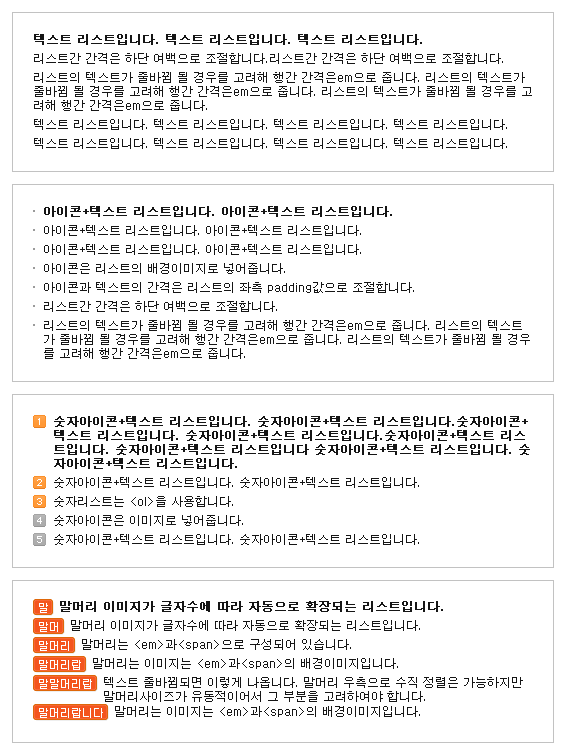
<style>
.page{position:relative;width:566px;height:755px;background:#ffffff}
.page>*{position:absolute;margin:0}
.t1{font:12px "Dotum";color:#151515;font-weight:bold}
.t2{font:12px "Dotum";color:#151515}
.t3{font:12px/14px "Dotum";color:#151515}
.t4{font:12px/14px "Dotum";color:#151515;font-weight:bold}
.t5{font:12px/19px "Dotum";color:#151515}
.t6{font:12px/19px "Dotum";color:#151515;font-weight:bold}
.t7{font:11px "Dotum";color:#ffffff}
</style>
<div class="page">
<p class="t1" style="left:34px;top:34px;width:388px;height:11px">텍스트 리스트입니다. 텍스트 리스트입니다. 텍스트 리스트입니다.</p>
<p class="t2" style="left:34px;top:53px;width:469px;height:11px">리스트간 간격은 하단 여백으로 조절합니다.리스트간 간격은 하단 여백으로 조절합니다.</p>
<p class="t3" style="left:34px;top:72px;width:498px;height:39px">리스트의 텍스트가 줄바뀜 될 경우를 고려해 행간 간격은em으로 줍니다. 리스트의 텍스트가<br>줄바뀜 될 경우를 고려해 행간 간격은em으로 줍니다. 리스트의 텍스트가 줄바뀜 될 경우를 고<br>려해 행간 간격은em으로 줍니다.</p>
<p class="t2" style="left:34px;top:119px;width:473px;height:11px">텍스트 리스트입니다. 텍스트 리스트입니다. 텍스트 리스트입니다. 텍스트 리스트입니다.</p>
<p class="t2" style="left:34px;top:138px;width:473px;height:11px">텍스트 리스트입니다. 텍스트 리스트입니다. 텍스트 리스트입니다. 텍스트 리스트입니다.</p>
<p class="t1" style="left:44px;top:206px;width:348px;height:11px">아이콘+텍스트 리스트입니다. 아이콘+텍스트 리스트입니다.</p>
<p class="t2" style="left:44px;top:225px;width:317px;height:11px">아이콘+텍스트 리스트입니다. 아이콘+텍스트 리스트입니다.</p>
<p class="t2" style="left:44px;top:244px;width:317px;height:11px">아이콘+텍스트 리스트입니다. 아이콘+텍스트 리스트입니다.</p>
<p class="t2" style="left:44px;top:263px;width:241px;height:11px">아이콘은 리스트의 배경이미지로 넣어줍니다.</p>
<p class="t2" style="left:44px;top:282px;width:370px;height:11px">아이콘과 텍스트의 간격은 리스트의 좌측 padding값으로 조절합니다.</p>
<p class="t2" style="left:44px;top:301px;width:233px;height:11px">리스트간 간격은 하단 여백으로 조절합니다.</p>
<p class="t3" style="left:44px;top:320px;width:486px;height:39px">리스트의 텍스트가 줄바뀜 될 경우를 고려해 행간 간격은em으로 줍니다. 리스트의 텍스트<br>가 줄바뀜 될 경우를 고려해 행간 간격은em으로 줍니다. 리스트의 텍스트가 줄바뀜 될 경우<br>를 고려해 행간 간격은em으로 줍니다.</p>
<p class="t4" style="left:54px;top:416px;width:476px;height:53px">숫자아이콘+텍스트 리스트입니다. 숫자아이콘+텍스트 리스트입니다.숫자아이콘+<br>텍스트 리스트입니다. 숫자아이콘+텍스트 리스트입니다.숫자아이콘+텍스트 리스<br>트입니다. 숫자아이콘+텍스트 리스트입니다 숫자아이콘+텍스트 리스트입니다. 숫<br>자아이콘+텍스트 리스트입니다.</p>
<p class="t5" style="left:54px;top:477px;width:365px;height:68px"><span class="t6"><br></span><br>숫자아이콘+텍스트 리스트입니다. 숫자아이콘+텍스트 리스트입니다.<br>숫자리스트는 &lt;ol&gt;을 사용합니다.<br>숫자아이콘은 이미지로 넣어줍니다.<br>숫자아이콘+텍스트 리스트입니다. 숫자아이콘+텍스트 리스트입니다.</p>
<p class="t7" style="left:39px;top:603px;width:9px;height:10px">말</p>
<p class="t1" style="left:60px;top:601px;width:383px;height:11px">말머리 이미지가 글자수에 따라 자동으로 확장되는 리스트입니다.</p>
<p class="t7" style="left:39px;top:622px;width:19px;height:10px">말머</p>
<p class="t2" style="left:71px;top:620px;width:349px;height:11px">말머리 이미지가 글자수에 따라 자동으로 확장되는 리스트입니다.</p>
<p class="t7" style="left:39px;top:641px;width:30px;height:10px">말머리</p>
<p class="t2" style="left:82px;top:639px;width:269px;height:11px">말머리는 &lt;em&gt;과&lt;span&gt;으로 구성되어 있습니다.</p>
<p class="t7" style="left:39px;top:660px;width:42px;height:10px">말머리랍</p>
<p class="t2" style="left:93px;top:658px;width:305px;height:11px">말머리는 이미지는 &lt;em&gt;과&lt;span&gt;의 배경이미지입니다.</p>
<p class="t3" style="left:104px;top:677px;width:419px;height:25px">텍스트 줄바뀜되면 이렇게 나옵니다. 말머리 우측으로 수직 정렬은 가능하지만<br>말머리사이즈가 유동적이어서 그 부분을 고려하여야 합니다.</p>
<p class="t7" style="left:39px;top:679px;width:53px;height:10px">말말머리랍</p>
<p class="t7" style="left:39px;top:708px;width:64px;height:10px">말머리랍니다</p>
<p class="t2" style="left:115px;top:706px;width:305px;height:11px">말머리는 이미지는 &lt;em&gt;과&lt;span&gt;의 배경이미지입니다.</p>
</div>
